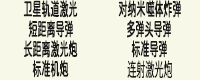
<style>
.page{position:relative;width:200px;height:80px;background:#f8f8e8}
.page>*{position:absolute;margin:0}
.t1{font:18.7px "ChillRoundFBold";color:#181818;scale:0.88 1}
.t2{font:18.7px "Sarasa-Gothic-SC-Regular";color:#181818;scale:0.88 1}
</style>
<div class="page">
<p class="t1" style="left:23px;top:0px;width:55px;height:18px">卫星轨道激光</p>
<p class="t1" style="left:118px;top:0px;width:63px;height:18px">对纳米噬体炸弹</p>
<p class="t1" style="left:28px;top:20px;width:45px;height:18px">短距离导弹</p>
<p class="t1" style="left:127px;top:20px;width:44px;height:18px">多弹头导弹</p>
<p class="t1" style="left:23px;top:40px;width:55px;height:18px">长距离激光炮</p>
<p class="t1" style="left:131px;top:40px;width:36px;height:18px">标准导弹</p>
<p class="t1" style="left:32px;top:60px;width:37px;height:18px">标准机炮</p>
<p class="t2" style="left:127px;top:60px;width:46px;height:18px">连射激光炮</p>
</div>
